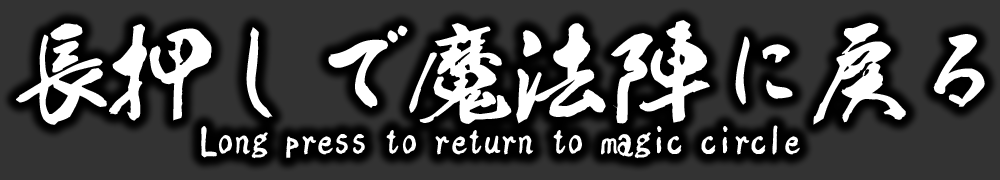
<style>
.page{position:relative;width:1000px;height:180px;background:#333333}
.page>*{position:absolute;margin:0}
.t1{font:100px "AB_ootori";color:#ffffff}
.t2{font:33.3px "AB_ootori";color:#ffffff}
</style>
<div class="page">
<p class="t1" style="left:16px;top:20px;width:969px;height:105px">長押しで魔法陣に戻る</p>
<p class="t2" style="left:201px;top:125px;width:599px;height:34px">Long press to return to magic circle</p>
</div>
